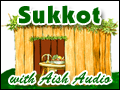
<style>
.page{position:relative;width:120px;height:90px}
.page>*{position:absolute;margin:0}
.t1{font:24px "KabelITCbyBT-Ultra";letter-spacing:0.05em;color:#006600}
.t2{font:16px "BrushScriptStd";color:#006600;scale:0.95 1}
</style>
<div class="page">
<p class="t1" style="left:18px;top:5px;width:82px;height:19px">Sukkot</p>
<p class="t2" style="left:10px;top:72px;width:101px;height:12px">with Aish Audio</p>
</div>
